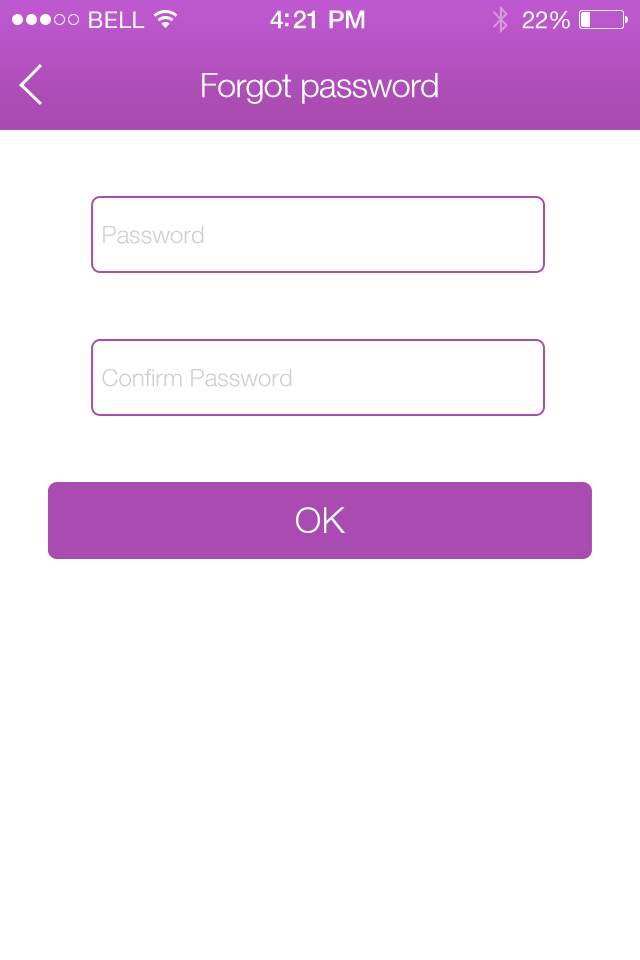
<style>
.page{position:relative;width:640px;height:960px;background:#ffffff}
.page>*{position:absolute;margin:0}
.t1{font:34px "HelveticaNeueLT-Light";letter-spacing:-0.02em;color:#ffffff}
.t2{font:24px "HelveticaNeueLT-Light";color:#cecece}
.t3{font:36px "HelveticaNeueLT-Light";color:#ffffff}
</style>
<div class="page">
<p class="t1" style="left:202px;top:73px;width:236px;height:31px">Forgot password</p>
<p class="t2" style="left:103px;top:226px;width:101px;height:18px">Password</p>
<p class="t2" style="left:102px;top:369px;width:190px;height:18px">Confirm Password</p>
<p class="t3" style="left:296px;top:507px;width:49px;height:26px">OK</p>
</div>
